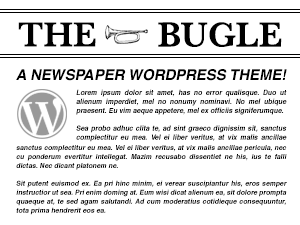
<style>
.page{position:relative;width:300px;height:225px;background:#ffffff}
.page>*{position:absolute;margin:0}
.t1{font:36px "Baskerville-SemiBold";color:#000000}
.t2{font:15px "Helvetica-Bold";letter-spacing:-0.01em;color:#000000;font-style:italic}
.t3{font:7px/9px "Helvetica-Bold";letter-spacing:0.01em;color:#000000;font-style:italic;scale:0.96 1}
</style>
<div class="page">
<p class="t1" style="left:18px;top:22px;width:78px;height:25px">THE</p>
<p class="t1" style="left:158px;top:22px;width:124px;height:25px">BUGLE</p>
<p class="t2" style="left:16px;top:69px;width:271px;height:12px">A NEWSPAPER WORDPRESS THEME!</p>
<p class="t3" style="left:76px;top:89px;width:211px;height:53px;text-align:justify">Lorem ipsum dolor sit amet, has no error qualisque. Duo ut alienum imperdiet, mel no nonumy nominavi. No mel ubique praesent. Eu vim aeque appetere, mel ex officiis signiferumque.<br><br>Sea probo adhuc clita te, ad sint graeco dignissim sit, sanctus complectitur eu mea. Vel ei liber veritus, at vix malis ancillae pericula, nec cu ponderum evertitur intellegat. Mazim recusabo dissentiet ne his, ius te falli dictas. Nec dicant platonem ne.</p>
<p class="t3" style="left:16px;top:145px;width:271px;height:70px;text-align:justify">sanctus complectitur eu mea. Vel ei liber veritus, at vix malis ancillae pericula, nec cu ponderum evertitur intellegat. Mazim recusabo dissentiet ne his, ius te falli dictas. Nec dicant platonem ne.<br><br>Sit putent euismod ex. Ea pri hinc minim, ei verear suscipiantur his, eros semper instructior ut sea. Pri enim doming at. Eum wisi dicat alienum ea, sit dolore prompta quaeque at, te sed agam salutandi. Ad cum moderatius cotidieque consequuntur, tota prima hendrerit eos ea.<br><br>Pro amet purto minim te, ad iudico iuvaret duo. Te duo aliquando gloriatur, eu vis tation probatus, sit latine tibique et. Illum persius corrumpit mei ex, eum graece causae ei. Fuisset minimum mea ne, sumo signiferumque his cu. Vix id vide appareat dignissim.</p>
</div>
